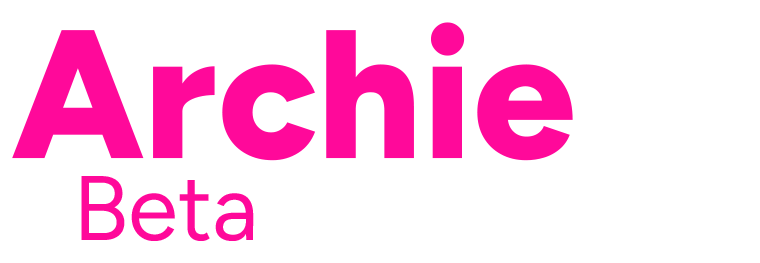
<style>
.page{position:relative;width:760px;height:263px;background:#ffffff}
.page>*{position:absolute;margin:0}
.t1{font:182.6px "Figtree_823.000wght_0ital";color:#ff099a}
.t2{font:91.3px "Figtree-Regular";color:#ff099a}
</style>
<div class="page">
<p class="t1" style="left:12px;top:22px;width:561px;height:139px">Archie</p>
<p class="t2" style="left:81px;top:176px;width:173px;height:65px">Beta</p>
</div>
